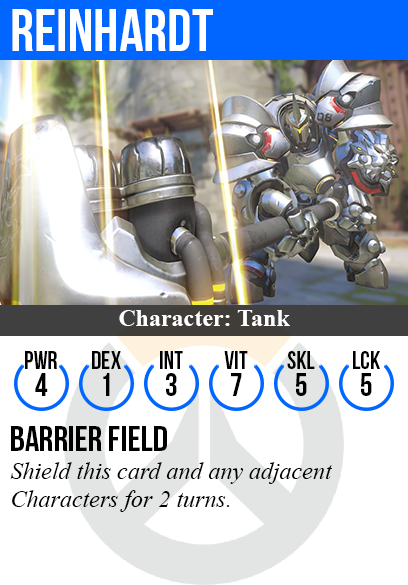
<style>
.page{position:relative;width:408px;height:585px;background:#ffffff}
.page>*{position:absolute;margin:0}
.t1{font:60px "BebasNeue";color:#ffffff}
.t2{font:24px "TimesNewRomanPS-BoldMT";color:#ffffff}
.t3{font:25px "BebasNeue";color:#000000}
.t4{font:32px "BebasNeue";color:#000000}
.t5{font:36px "BebasNeue";color:#000000}
.t6{font:24px "TimesNewRomanPS-ItalicMT";color:#000000}
</style>
<div class="page">
<p class="t1" style="left:12px;top:9px;width:201px;height:42px">reinhardt</p>
<p class="t2" style="left:119px;top:310px;width:171px;height:16px">Character: Tank</p>
<p class="t3" style="left:25px;top:351px;width:32px;height:18px">PWR</p>
<p class="t3" style="left:92px;top:351px;width:29px;height:18px">dex</p>
<p class="t3" style="left:160px;top:351px;width:23px;height:18px">int</p>
<p class="t3" style="left:224px;top:351px;width:24px;height:18px">vit</p>
<p class="t3" style="left:287px;top:351px;width:28px;height:18px">skl</p>
<p class="t3" style="left:353px;top:351px;width:27px;height:18px">lck</p>
<p class="t4" style="left:35px;top:373px;width:13px;height:23px">4</p>
<p class="t4" style="left:103px;top:373px;width:7px;height:23px">1</p>
<p class="t4" style="left:166px;top:373px;width:11px;height:23px">3</p>
<p class="t4" style="left:231px;top:373px;width:11px;height:23px">7</p>
<p class="t4" style="left:296px;top:373px;width:11px;height:23px">5</p>
<p class="t4" style="left:361px;top:373px;width:11px;height:23px">5</p>
<p class="t5" style="left:11px;top:426px;width:156px;height:25px">barrier field</p>
<p class="t6" style="left:10px;top:462px;width:322px;height:50px">Shield this card and any adjacent<br>Characters for 2 turns.</p>
</div>
